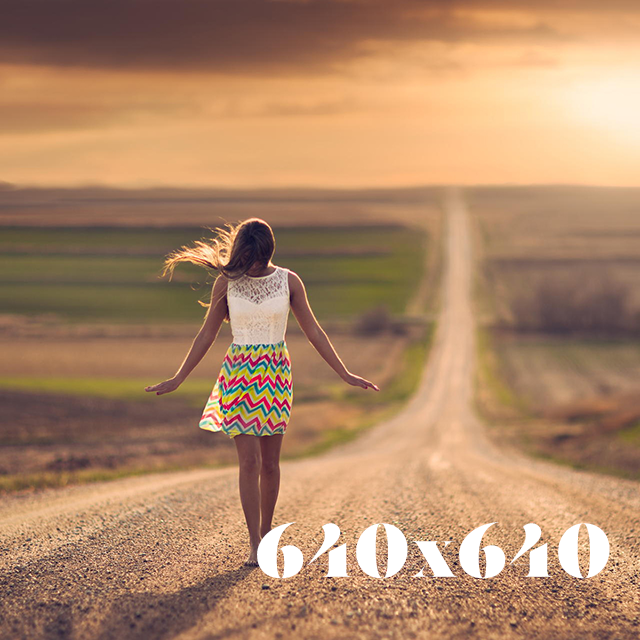
<style>
.page{position:relative;width:640px;height:640px}
.page>*{position:absolute;margin:0}
.t1{font:75px "Salome-Fine";color:#ffffff}
</style>
<div class="page">
<p class="t1" style="left:257px;top:522px;width:353px;height:57px">640x640</p>
</div>
